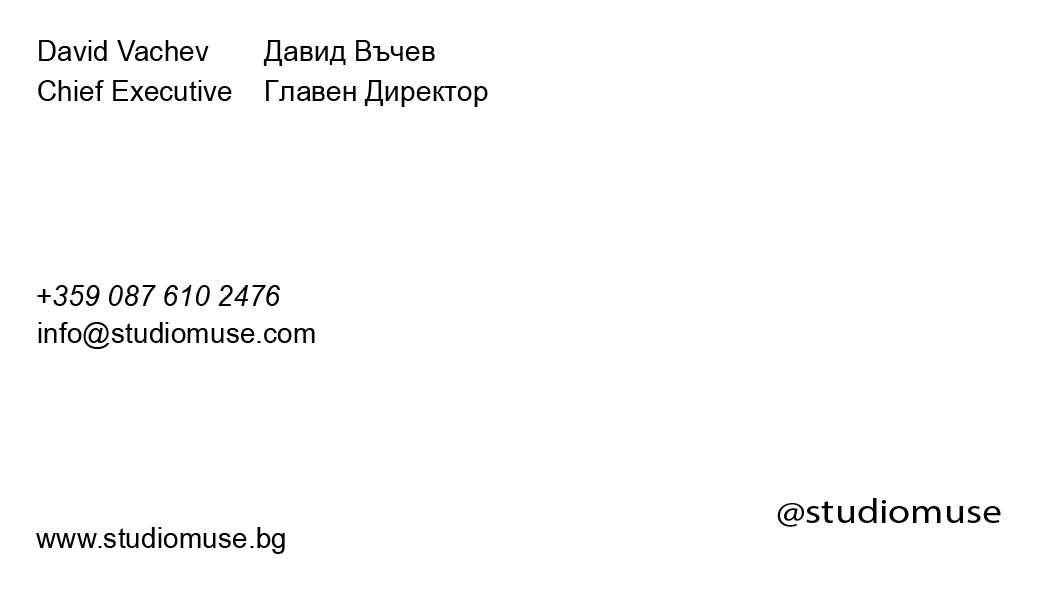
<style>
.page{position:relative;width:1050px;height:600px;background:#ffffff}
.page>*{position:absolute;margin:0}
.t1{font:29.4px/20px "ArialNarrow";color:#000000;scale:1.17 1}
.t2{font:29.4px "ArialNarrow-Italic";color:#000000;scale:1.17 1}
.t3{font:29.4px "ArialNarrow";color:#000000;scale:1.17 1}
.t4{font:34.2px "MyriadPro-Regular";color:#000000;scale:1.17 1}
</style>
<div class="page">
<p class="t1" style="left:38px;top:40px;width:194px;height:61px">David Vachev<br><br>Chief Executive</p>
<p class="t1" style="left:263px;top:40px;width:225px;height:67px">Давид Въчев<br><br>Главен Директор</p>
<p class="t2" style="left:37px;top:285px;width:243px;height:21px">+359 087 610 2476</p>
<p class="t3" style="left:38px;top:322px;width:277px;height:27px">info@studiomuse.com</p>
<p class="t4" style="left:777px;top:498px;width:224px;height:29px">@studiomuse</p>
<p class="t3" style="left:36px;top:527px;width:249px;height:27px">www.studiomuse.bg</p>
</div>
